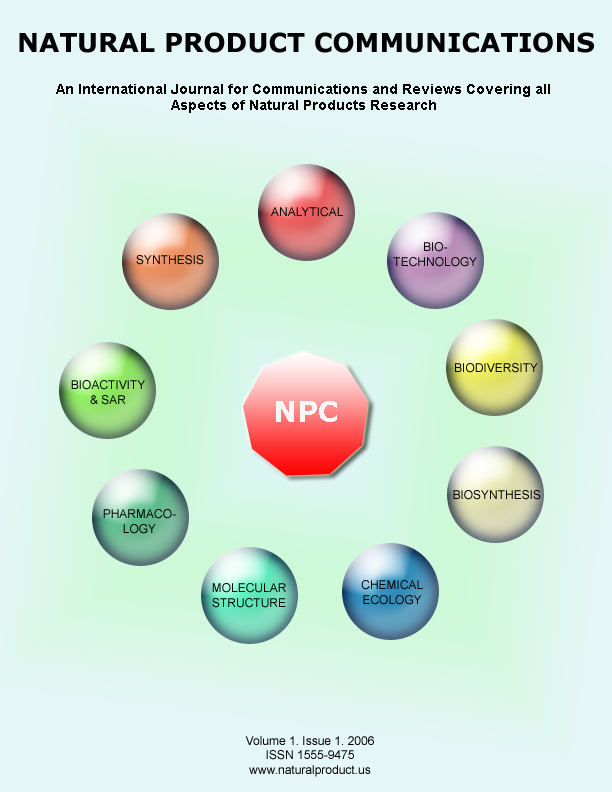
<style>
.page{position:relative;width:612px;height:792px;background:#e5f6f7}
.page>*{position:absolute;margin:0}
.t1{font:26px "Verdana-Bold";color:#000000;text-transform:uppercase}
.t2{font:14px "Arial-BoldMT";color:#000000}
.t3{font:12px "ArialMT";color:#000000}
.t4{font:28px "Verdana-Bold";color:#f9f7f7}
</style>
<div class="page">
<p class="t1" style="left:19px;top:32px;width:575px;height:21px">Natural Product Communications</p>
<p class="t2" style="left:56px;top:84px;width:494px;height:29px;text-align:center">An International Journal for Communications and Reviews Covering all Aspects of Natural Products Research</p>
<p class="t3" style="left:271px;top:207px;width:72px;height:10px">ANALYTICAL</p>
<p class="t3" style="left:393px;top:242px;width:84px;height:25px;text-align:center">BIO-<br>TECHNOLOGY</p>
<p class="t3" style="left:136px;top:255px;width:68px;height:10px">SYNTHESIS</p>
<p class="t3" style="left:455px;top:363px;width:83px;height:10px">BIODIVERSITY</p>
<p class="t3" style="left:71px;top:380px;width:74px;height:25px;text-align:center">BIOACTIVITY &amp; SAR</p>
<p class="t4" style="left:276px;top:401px;width:61px;height:21px">NPC</p>
<p class="t3" style="left:453px;top:490px;width:88px;height:10px">BIOSYNTHESIS</p>
<p class="t3" style="left:103px;top:509px;width:73px;height:25px;text-align:center">PHARMACO- LOGY</p>
<p class="t3" style="left:361px;top:580px;width:62px;height:25px;text-align:center">CHEMICAL ECOLOGY</p>
<p class="t3" style="left:212px;top:583px;width:74px;height:25px;text-align:center">MOLECULAR STRUCTURE</p>
<p class="t3" style="left:245px;top:736px;width:129px;height:41px;text-align:center">Volume 1. Issue 1. 2006<br>ISSN 1555-9475<br>www.naturalproduct.us</p>
</div>
